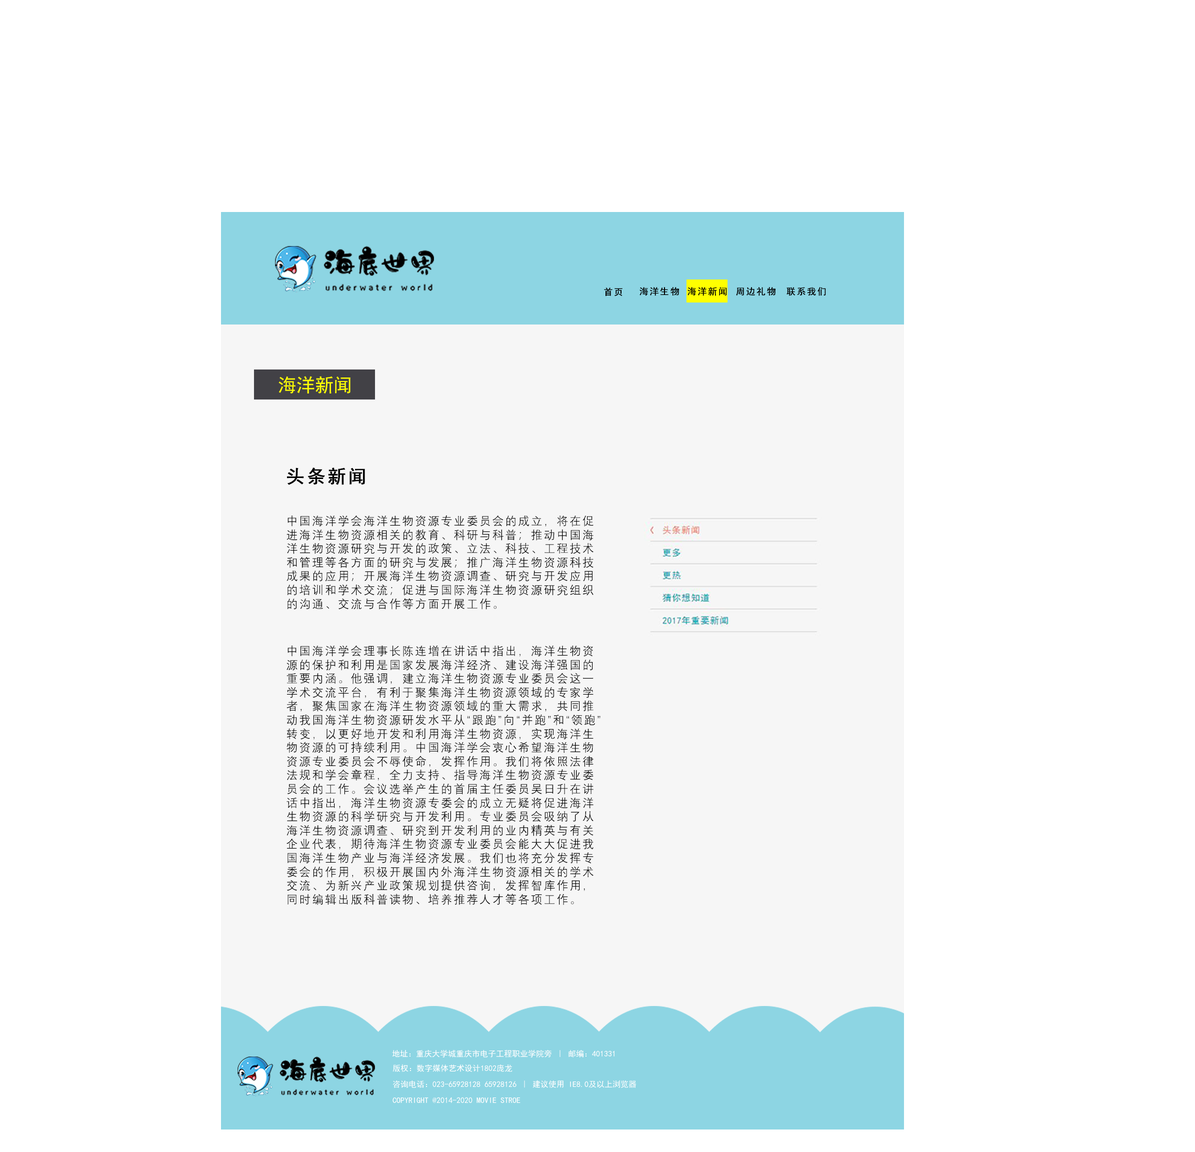
<style>
.page{position:relative;width:1195px;height:1152px;background:#ffffff}
.page>*{position:absolute;margin:0}
.t1{font:9px "SimHei";letter-spacing:0.12em;color:#000000;text-transform:uppercase;font-weight:bold}
.t2{font:18px "SimHei";letter-spacing:0.12em;color:#000000;text-transform:uppercase;font-weight:bold}
.t3{font:11.5px "DengXian";letter-spacing:0.12em;color:#000000;text-transform:uppercase}
.t4{font:8px "SimHei";color:#ffffff;text-transform:uppercase}
</style>
<div class="page">
<p class="t1" style="left:604px;top:288px;width:18px;height:8px">首页</p>
<p class="t1" style="left:640px;top:287px;width:39px;height:9px">海洋生物</p>
<p class="t1" style="left:688px;top:287px;width:39px;height:9px">海洋新闻</p>
<p class="t1" style="left:736px;top:287px;width:40px;height:9px">周边礼物</p>
<p class="t1" style="left:786px;top:287px;width:40px;height:9px">联系我们</p>
<p class="t2" style="left:287px;top:468px;width:78px;height:17px">头条新闻</p>
<p class="t3" style="left:286px;top:515px;width:308px;height:95px">中国海洋学会海洋生物资源专业委员会的成立，将在促进海洋生物资源相关的教育、科研与科普；推动中国海洋生物资源研究与开发的政策、立法、科技、工程技术和管理等各方面的研究与发展；推广海洋生物资源科技成果的应用；开展海洋生物资源调查、研究与开发应用的培训和学术交流；促进与国际海洋生物资源研究组织的沟通、交流与合作等方面开展工作。</p>
<p class="t3" style="left:286px;top:645px;width:314px;height:260px">中国海洋学会理事长陈连增在讲话中指出，海洋生物资源的保护和利用是国家发展海洋经济、建设海洋强国的重要内涵。他强调，建立海洋生物资源专业委员会这一学术交流平台，有利于聚集海洋生物资源领域的专家学者，聚焦国家在海洋生物资源领域的重大需求，共同推动我国海洋生物资源研发水平从“跟跑”向“并跑”和“领跑”转变，以更好地开发和利用海洋生物资源，实现海洋生物资源的可持续利用。中国海洋学会衷心希望海洋生物资源专业委员会不辱使命，发挥作用。我们将依照法律法规和学会章程，全力支持、指导海洋生物资源专业委员会的工作。会议选举产生的首届主任委员吴日升在讲话中指出，海洋生物资源专委会的成立无疑将促进海洋生物资源的科学研究与开发利用。专业委员会吸纳了从海洋生物资源调查、研究到开发利用的业内精英与有关企业代表，期待海洋生物资源专业委员会能大大促进我国海洋生物产业与海洋经济发展。我们也将充分发挥专委会的作用，积极开展国内外海洋生物资源相关的学术交流、为新兴产业政策规划提供咨询，发挥智库作用，同时编辑出版科普读物、培养推荐人才等各项工作。</p>
<p class="t4" style="left:392px;top:1050px;width:222px;height:8px">地址：重庆大学城重庆市电子工程职业学院旁 ｜ 邮编：401331</p>
<p class="t4" style="left:392px;top:1064px;width:120px;height:8px">版权：数字媒体艺术设计1802庞龙</p>
<p class="t4" style="left:392px;top:1080px;width:244px;height:8px">咨询电话：023-65928128 65928126 ｜ 建议使用 IE8.0及以上浏览器</p>
<p class="t4" style="left:392px;top:1097px;width:128px;height:6px">copyright @2014-2020 MOVIE STROE</p>
</div>
